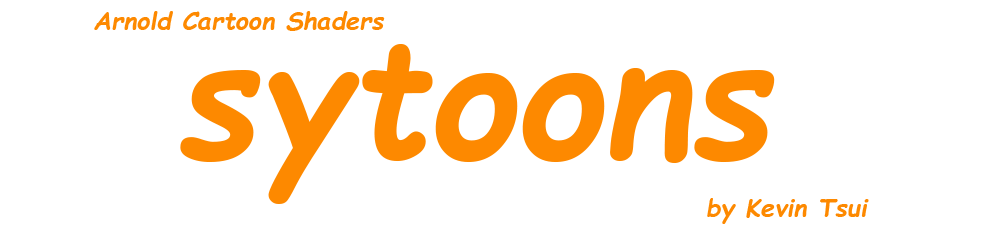
<style>
.page{position:relative;width:1000px;height:240px;background:#ffffff}
.page>*{position:absolute;margin:0}
.t1{font:25px "ComicSansMS-BoldItalic";color:#fe8900}
.t2{font:166.7px "ComicSansMS-BoldItalic";color:#fe8900}
</style>
<div class="page">
<p class="t1" style="left:94px;top:11px;width:291px;height:20px">Arnold Cartoon Shaders</p>
<p class="t2" style="left:180px;top:44px;width:595px;height:160px">sytoons</p>
<p class="t1" style="left:707px;top:198px;width:162px;height:26px">by Kevin Tsui</p>
</div>
